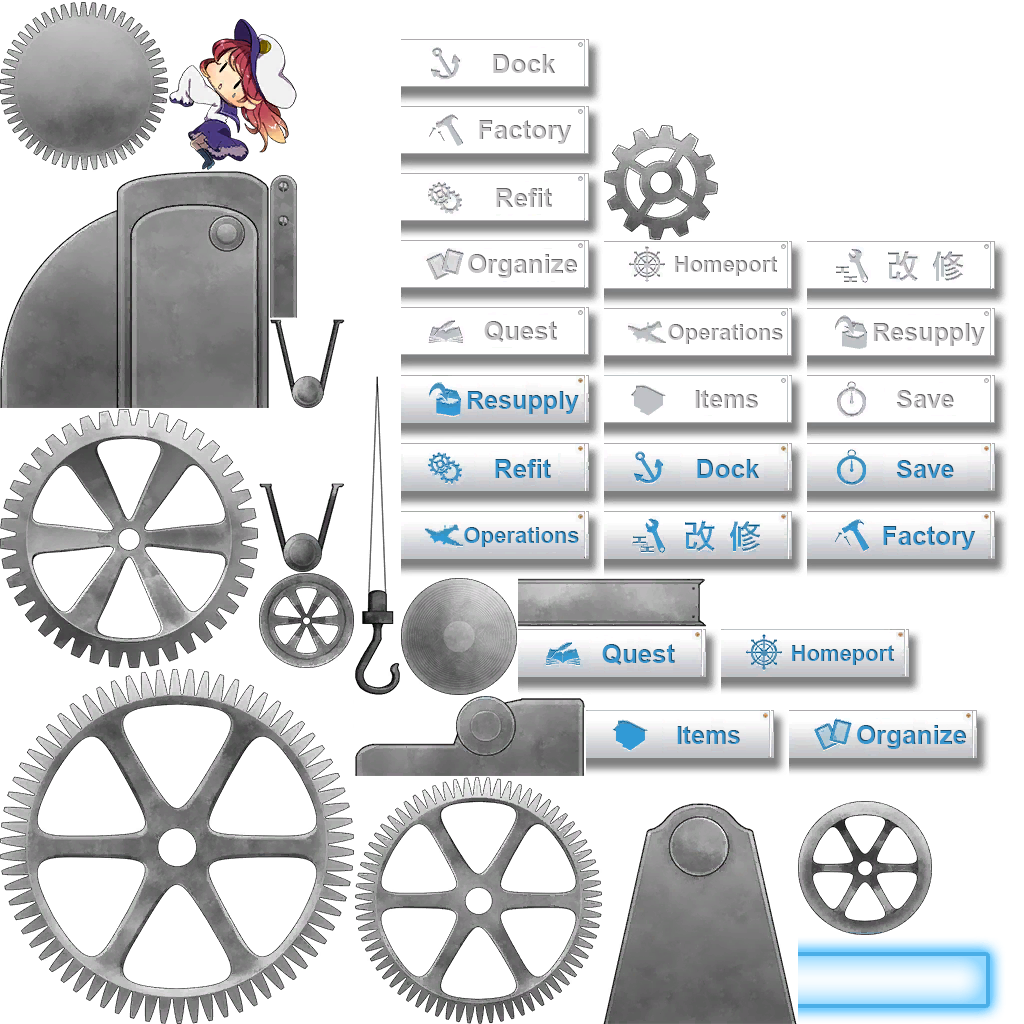
<style>
.page{position:relative;width:1024px;height:1024px;background:#ffffff}
.page>*{position:absolute;margin:0}
.t1{font:26px "Arial-BoldMT";color:#c5c3c5}
.t2{font:26px "Arial-BoldMT"}
.t3{font:22px "Arial-BoldMT"}
.t4{font:25px "Arial-BoldMT"}
</style>
<div class="page">
<p class="t1" style="left:493px;top:54px;width:62px;height:19px">Dock</p>
<p class="t2" style="left:479px;top:120px;width:93px;height:24px">Factory</p>
<p class="t2" style="left:496px;top:188px;width:56px;height:19px">Refit</p>
<p class="t1" style="left:468px;top:254px;width:109px;height:24px">Organize</p>
<p class="t3" style="left:675px;top:256px;width:102px;height:20px">Homeport</p>
<p class="t2" style="left:484px;top:321px;width:73px;height:21px">Quest</p>
<p class="t3" style="left:668px;top:324px;width:115px;height:20px">Operations</p>
<p class="t4" style="left:873px;top:323px;width:112px;height:23px">Resupply</p>
<p class="t4" style="left:695px;top:390px;width:63px;height:18px">Items</p>
<p class="t4" style="left:896px;top:390px;width:58px;height:18px">Save</p>
<p class="t4" style="left:467px;top:391px;width:112px;height:23px">Resupply</p>
<p class="t2" style="left:495px;top:459px;width:56px;height:19px">Refit</p>
<p class="t2" style="left:697px;top:459px;width:62px;height:19px">Dock</p>
<p class="t4" style="left:896px;top:460px;width:58px;height:18px">Save</p>
<p class="t3" style="left:464px;top:527px;width:115px;height:20px">Operations</p>
<p class="t2" style="left:883px;top:526px;width:93px;height:24px">Factory</p>
<p class="t2" style="left:602px;top:644px;width:73px;height:21px">Quest</p>
<p class="t3" style="left:792px;top:645px;width:102px;height:20px">Homeport</p>
<p class="t4" style="left:677px;top:726px;width:63px;height:18px">Items</p>
<p class="t2" style="left:857px;top:725px;width:109px;height:24px">Organize</p>
</div>
